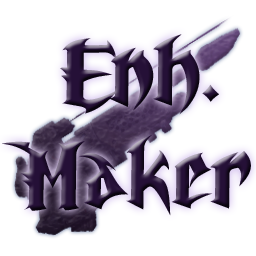
<style>
.page{position:relative;width:256px;height:256px;background:#ffffff}
.page>*{position:absolute;margin:0}
.t1{font:85.8px "UnrealTournament";scale:0.83 1}
</style>
<div class="page">
<p class="t1" style="left:2px;top:34px;width:249px;height:182px;text-align:center;rotate:-1deg">Enh.<br>Maker</p>
</div>
